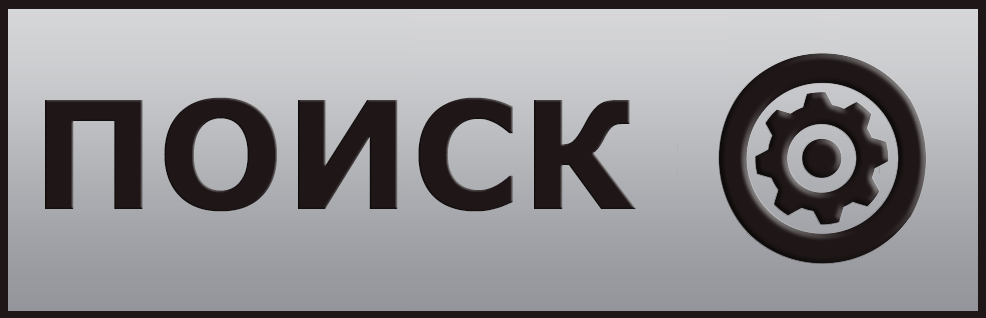
<style>
.page{position:relative;width:986px;height:318px;background:#1f1717}
.page>*{position:absolute;margin:0}
.t1{font:150px "Verdana-Bold";color:#1f1717}
</style>
<div class="page">
<p class="t1" style="left:45px;top:97px;width:591px;height:115px">ПОИСК</p>
</div>
